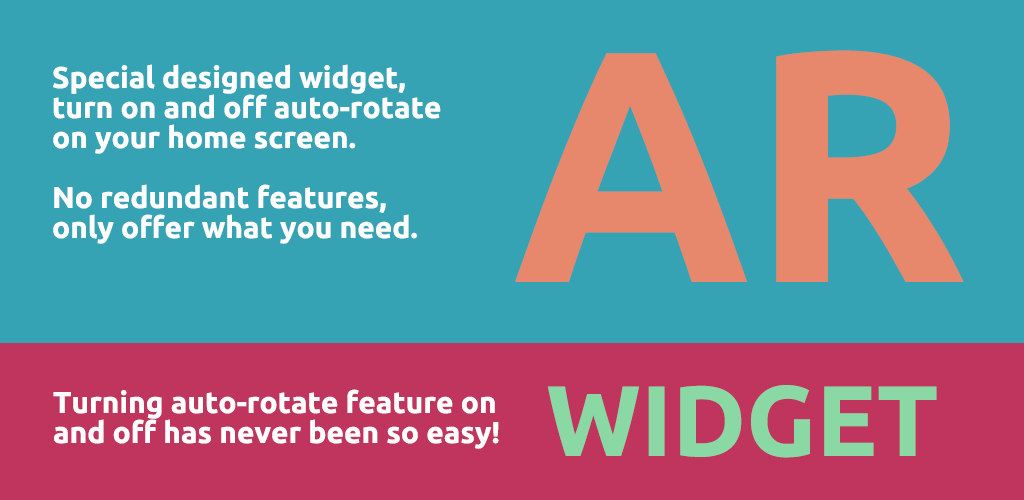
<style>
.page{position:relative;width:1024px;height:500px;background:#35a3b4}
.page>*{position:absolute;margin:0}
.t1{font:330px "Ubuntu-Bold";color:#e7886c}
.t2{font:30px/30px "Ubuntu-Bold";color:#ffffff}
.t3{font:100px "Ubuntu-Bold";color:#8ad8a4}
</style>
<div class="page">
<p class="t1" style="left:515px;top:50px;width:449px;height:232px">AR</p>
<p class="t2" style="left:53px;top:64px;width:388px;height:180px">Special designed widget, <br>turn on and off auto-rotate <br>on your home screen.<br><br>No redundant features, <br>only offer what you need.</p>
<p class="t2" style="left:53px;top:389px;width:446px;height:60px">Turning auto-rotate feature on <br>and off has never been so easy!</p>
<p class="t3" style="left:547px;top:385px;width:390px;height:73px">WIDGET</p>
</div>
